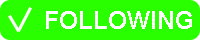
<style>
.page{position:relative;width:200px;height:40px;background:#2aff00}
.page>*{position:absolute;margin:0}
.t1{font:25px "Arial-BoldMT";color:#ffffff}
</style>
<div class="page">
<p class="t1" style="left:46px;top:11px;width:146px;height:18px">FOLLOWING</p>
</div>
